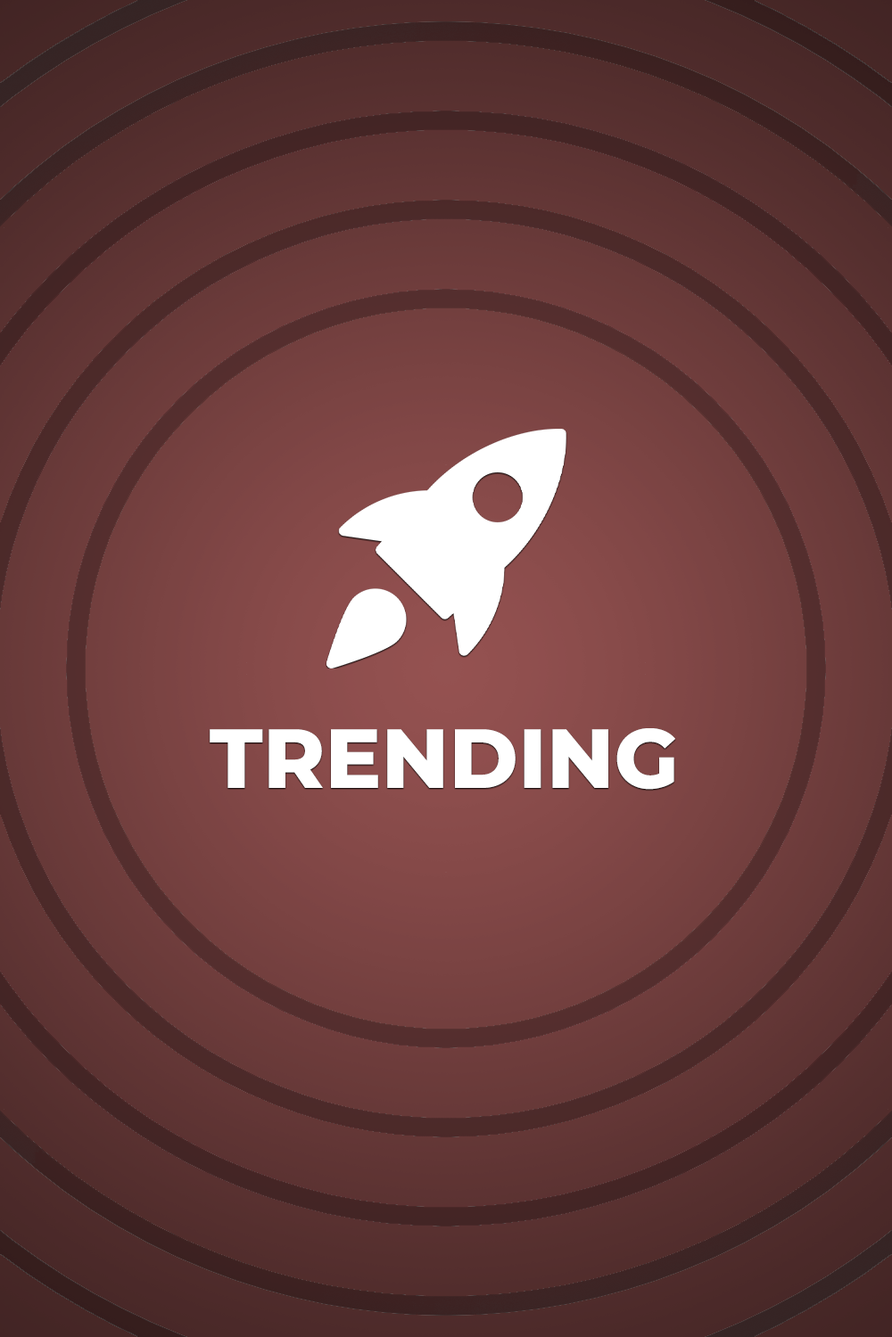
<style>
.page{position:relative;width:892px;height:1337px}
.page>*{position:absolute;margin:0}
.t1{font:83.8px "MontserratRoman-ExtraBold";color:#ffffff}
</style>
<div class="page">
<p class="t1" style="left:210px;top:728px;width:465px;height:62px">TRENDING</p>
</div>
